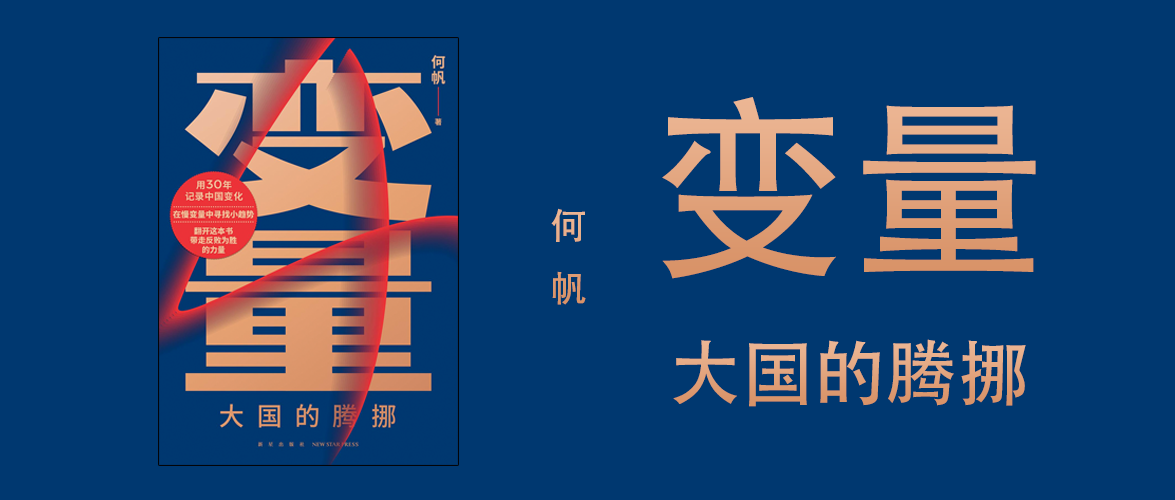
<style>
.page{position:relative;width:1175px;height:500px;background:#003870}
.page>*{position:absolute;margin:0}
.t1{font:200px "AdobeHeitiStd-Regular";color:#e2a47d}
.t2{font:36px "AdobeHeitiStd-Regular"}
.t3{font:72px "AdobeHeitiStd-Regular";color:#e2a57e}
</style>
<div class="page">
<p class="t1" style="left:662px;top:97px;width:374px;height:182px">变量</p>
<p class="t2" style="left:551px;top:208px;width:35px;height:97px">何<br>帆</p>
<p class="t3" style="left:673px;top:339px;width:353px;height:68px">大国的腾挪</p>
</div>
